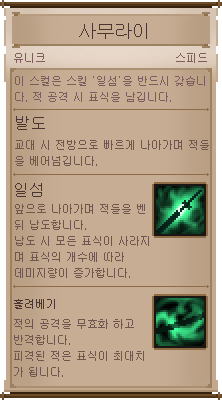
<style>
.page{position:relative;width:222px;height:400px;background:#c7ad94}
.page>*{position:absolute;margin:0}
.t1{font:18px "Gulim";color:#4b3531}
.t2{font:11px "Gulim";color:#7e5c5e}
.t3{font:11px/16px "Gulim";color:#7e5c5e}
.t4{font:16px "Gulim";color:#4b3531}
.t5{font:11px/16px "Gulim";color:#70574e}
.t6{font:11px "Gulim";color:#4b3531}
</style>
<div class="page">
<p class="t1" style="left:79px;top:23px;width:68px;height:16px">사무라이</p>
<p class="t2" style="left:14px;top:53px;width:31px;height:10px">유니크</p>
<p class="t2" style="left:176px;top:53px;width:31px;height:10px">스피드</p>
<p class="t3" style="left:15px;top:76px;width:190px;height:26px">이 스컬은 스킬 ‘일섬’을 반드시 갖습니<br>다. 적 공격 시 표식을 남깁니다.</p>
<p class="t4" style="left:16px;top:116px;width:29px;height:14px">발도</p>
<p class="t5" style="left:15px;top:140px;width:194px;height:26px">교대 시 전방으로 빠르게 나아가며 적들<br>을 베어넘깁니다.</p>
<p class="t4" style="left:15px;top:183px;width:27px;height:14px">일섬</p>
<p class="t5" style="left:15px;top:204px;width:134px;height:74px">앞으로 나아가며 적들을 벤<br>뒤 납도합니다.<br>납도 시 모든 표식이 사라지<br>며 표식의 개수에 따라 <br>데미지량이 증가합니다.</p>
<p class="t6" style="left:14px;top:299px;width:41px;height:10px">흘려베기</p>
<p class="t5" style="left:14px;top:319px;width:130px;height:58px">적의 공격을 무효화 하고<br>반격합니다.<br>피격된 적은 표식이 최대치<br>가 됩니다.</p>
</div>
